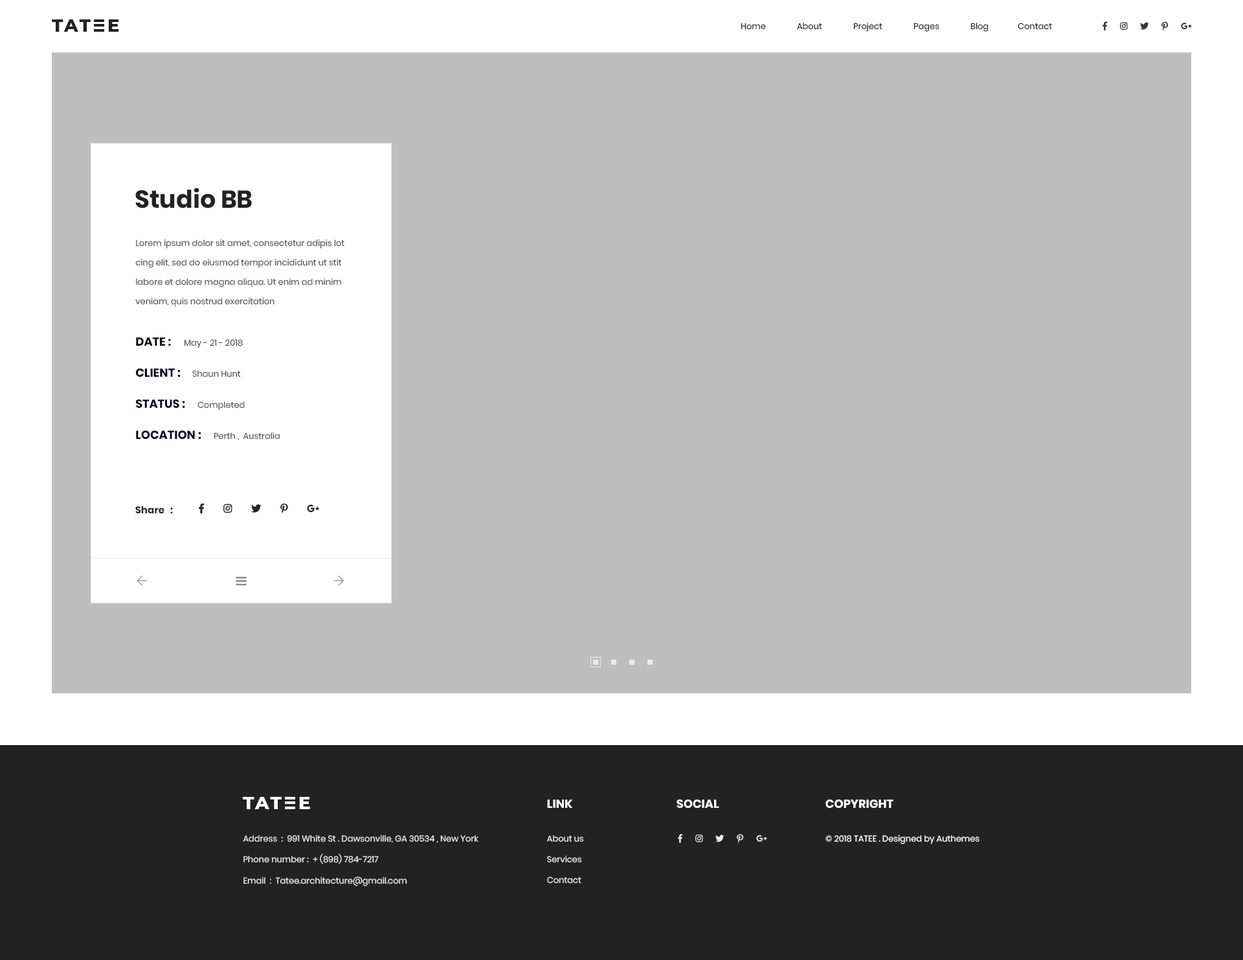
<style>
.page{position:relative;width:1243px;height:960px;background:#bebebe}
.page>*{position:absolute;margin:0}
.t1{font:17.8px "Montserrat-ExtraBold";letter-spacing:0.1em;color:#222222;text-transform:uppercase}
.t2{font:8.4px "Poppins-Regular";color:#222222}
.t3{font:24.6px "Poppins-Bold";color:#222222}
.t4{font:8.4px/19.4px "Poppins-Regular";color:#555555}
.t5{font:11.6px "Poppins-Bold";color:#000022;text-transform:uppercase}
.t6{font:8.4px "Poppins-Regular";color:#555555}
.t7{font:9.7px "Poppins-Bold";color:#222222}
.t8{font:17.8px "Montserrat-ExtraBold";letter-spacing:0.1em;color:#ffffff;text-transform:uppercase}
.t9{font:11.6px "Poppins-Bold";color:#ffffff;text-transform:uppercase}
.t10{font:8.4px "Poppins-Regular";color:#ebebeb}
.t11{font:8.4px/20.7px "Poppins-Regular";color:#ebebeb}
.t12{font:8.4px "Poppins-Regular";color:#ffffff}
</style>
<div class="page">
<p class="t1" style="left:52px;top:19px;width:39px;height:13px">tat</p>
<p class="t1" style="left:108px;top:19px;width:11px;height:13px">e</p>
<p class="t2" style="left:740px;top:22px;width:312px;height:10px">Home               About               Project               Pages               Blog              Contact</p>
<p class="t3" style="left:135px;top:188px;width:117px;height:20px">Studio BB</p>
<p class="t4" style="left:135px;top:239px;width:209px;height:68px">Lorem ipsum dolor sit amet, consectetur adipis lot cing elit, sed do eiusmod tempor incididunt ut stit labore et dolore magna aliqua. Ut enim ad minim veniam, quis nostrud exercitation</p>
<p class="t5" style="left:136px;top:337px;width:35px;height:9px">date :</p>
<p class="t6" style="left:184px;top:339px;width:59px;height:9px">May - 21 - 2018</p>
<p class="t5" style="left:136px;top:368px;width:44px;height:9px">Client :</p>
<p class="t6" style="left:192px;top:370px;width:49px;height:7px">Shaun Hunt</p>
<p class="t5" style="left:136px;top:399px;width:49px;height:9px">status :</p>
<p class="t6" style="left:197px;top:401px;width:48px;height:9px">Completed</p>
<p class="t5" style="left:136px;top:430px;width:65px;height:9px">location :</p>
<p class="t6" style="left:214px;top:432px;width:66px;height:8px">Perth ,  Australia</p>
<p class="t7" style="left:135px;top:506px;width:38px;height:7px">Share   :</p>
<p class="t8" style="left:243px;top:797px;width:39px;height:12px">tat</p>
<p class="t8" style="left:299px;top:797px;width:11px;height:12px">e</p>
<p class="t9" style="left:547px;top:799px;width:25px;height:9px">Link</p>
<p class="t9" style="left:676px;top:799px;width:43px;height:9px">Social</p>
<p class="t9" style="left:825px;top:799px;width:68px;height:9px">copyright</p>
<p class="t10" style="left:243px;top:834px;width:235px;height:9px">Address  :  991 White St . Dawsonville, GA 30534 , New York</p>
<p class="t11" style="left:547px;top:835px;width:37px;height:48px">About us<br>Services<br>Contact</p>
<p class="t12" style="left:825px;top:834px;width:154px;height:10px">© 2018 TATEE . Designed by Authemes</p>
<p class="t10" style="left:243px;top:854px;width:136px;height:10px">Phone number :  + (898) 784-7217</p>
<p class="t10" style="left:243px;top:876px;width:164px;height:10px">Email  :  Tatee.architecture@gmail.com</p>
</div>
